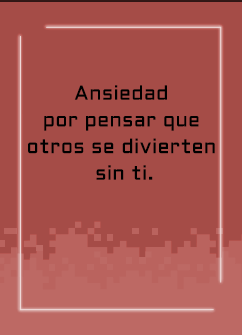
<style>
.page{position:relative;width:242px;height:335px;background:#a54c47}
.page>*{position:absolute;margin:0}
.t1{font:20px/26.7px "Aldrich-Regular";letter-spacing:0.015em;color:#000000}
</style>
<div class="page">
<p class="t1" style="left:28px;top:85px;width:187px;height:95px;text-align:center">Ansiedad <br>por pensar que <br>otros se divierten <br>sin ti.</p>
</div>
